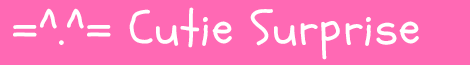
<style>
.page{position:relative;width:470px;height:65px;background:#ff69b4}
.page>*{position:absolute;margin:0}
.t1{font:48px "Schoolbell";letter-spacing:0.025em;color:#ffffff}
</style>
<div class="page">
<p class="t1" style="left:13px;top:7px;width:406px;height:53px">=^.^= Cutie Surprise</p>
</div>
